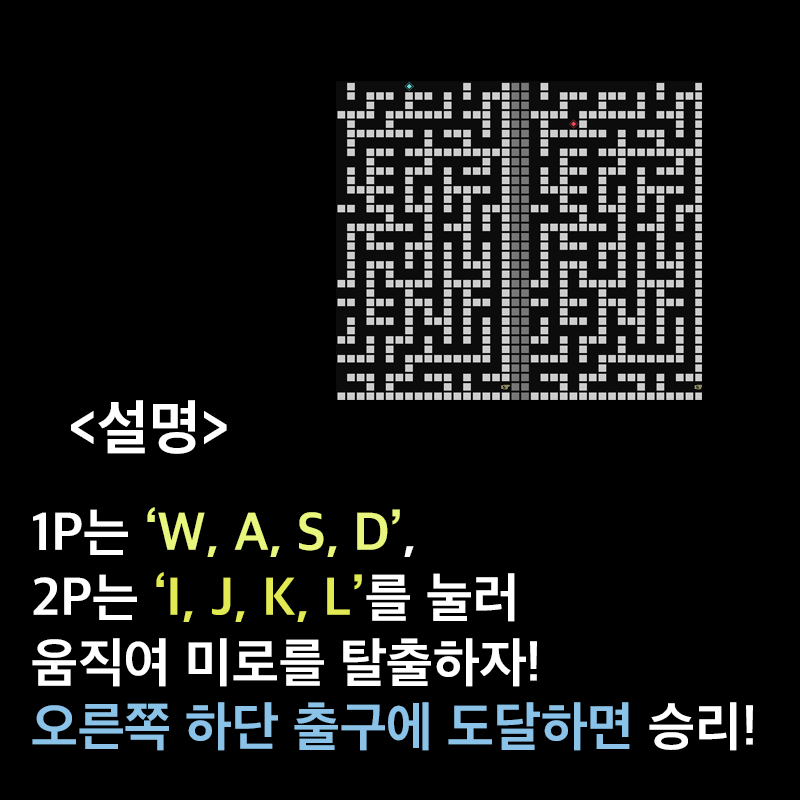
<style>
.page{position:relative;width:800px;height:800px;background:#000000}
.page>*{position:absolute;margin:0}
.t1{font:60px "AppleSDGothicNeoB00";color:#ffffff}
.t2{font:54px "AppleSDGothicNeoB00";color:#ffffff}
.t3{font:54px "AppleSDGothicNeoB00";color:#e9f67e}
.t4{font:54px "AppleSDGothicNeoB00";color:#e1ea52}
.t5{font:54px "AppleSDGothicNeoB00";color:#8ac3e7}
</style>
<div class="page">
<p class="t1" style="left:71px;top:400px;width:156px;height:54px">&lt;설명&gt;</p>
<p class="t2" style="left:32px;top:507px;width:721px;height:244px">1P는 <span class="t3">‘W, A, S, D’</span>,<br>2P는 <span class="t4">‘I, J, K, L’</span>를 눌러<br>움직여 미로를 탈출하자!<br><span class="t5">오른쪽 하단 출구에 도달하면</span> 승리!</p>
</div>
